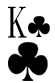
<style>
.page{position:relative;width:55px;height:83px;background:#ffffff}
.page>*{position:absolute;margin:0}
.t1{font:42px "DFKaiShu-SB-Estd-BF";color:#000000}
</style>
<div class="page">
<p class="t1" style="left:8px;top:6px;width:19px;height:32px">K</p>
</div>
